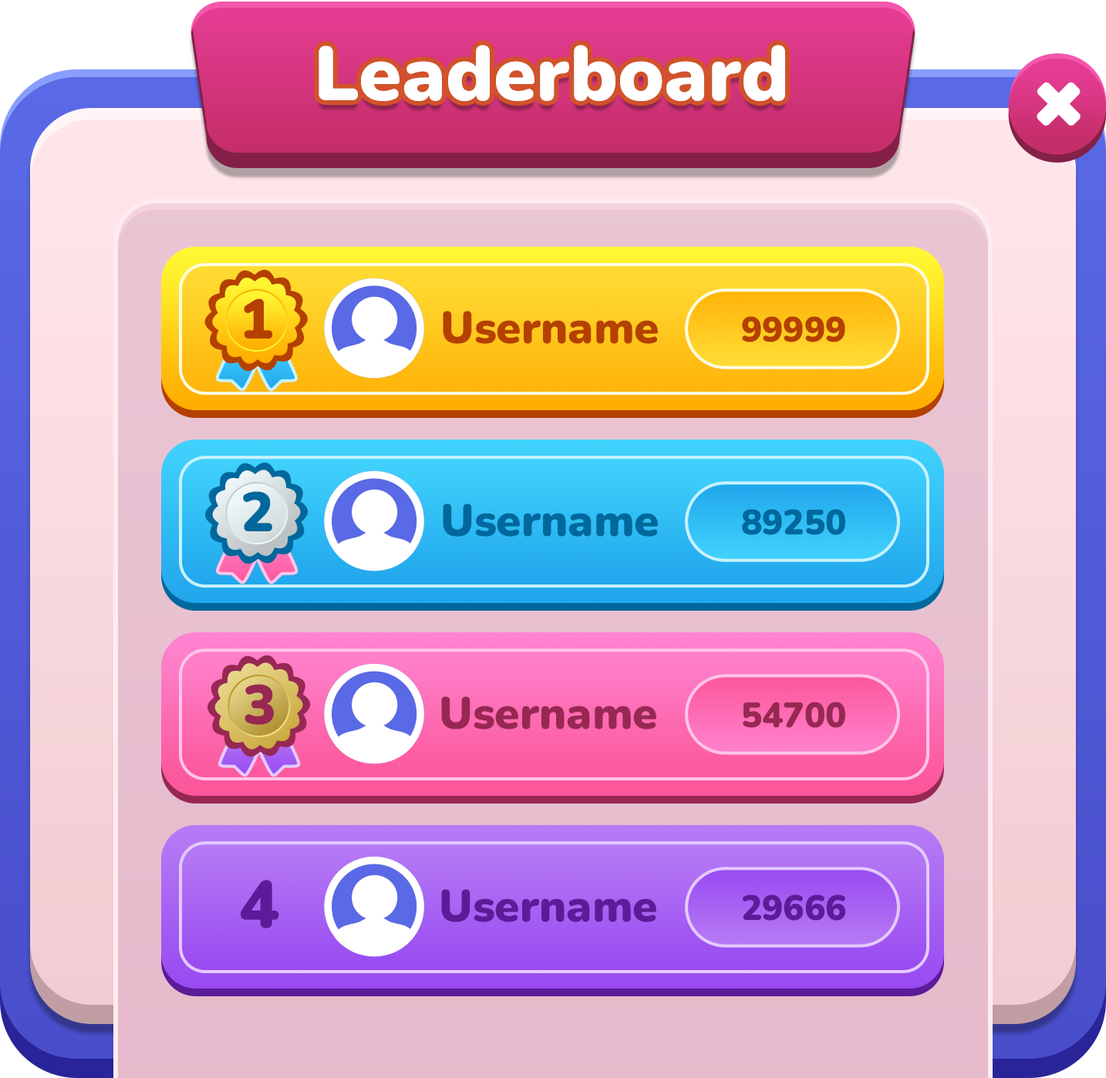
<style>
.page{position:relative;width:1106px;height:1078px}
.page>*{position:absolute;margin:0}
.t1{font:77.1px "Nunito-Black";color:#ffffff}
.t2{font:55.5px "Nunito-Black";color:#b44001}
.t3{font:45px "Nunito-Black";color:#b44001}
.t4{font:35.1px "Nunito-Black";color:#b44001}
.t5{font:55.5px "Nunito-Black";color:#00689c}
.t6{font:45px "Nunito-Black";color:#00689c}
.t7{font:35.1px "Nunito-Black";color:#00689c}
.t8{font:55.5px "Nunito-Black";color:#972853}
.t9{font:45px "Nunito-Black";color:#972853}
.t10{font:35.1px "Nunito-Black";color:#972853}
.t11{font:66.6px "Nunito-Black";color:#5c1b98}
.t12{font:45px "Nunito-Black";color:#5c1b98}
.t13{font:35.1px "Nunito-Black";color:#5c1b98}
</style>
<div class="page">
<p class="t1" style="left:319px;top:45px;width:466px;height:56px">Leaderboard</p>
<p class="t2" style="left:244px;top:298px;width:29px;height:41px">1</p>
<p class="t3" style="left:443px;top:311px;width:215px;height:33px">Username</p>
<p class="t4" style="left:742px;top:316px;width:103px;height:26px">99999</p>
<p class="t5" style="left:243px;top:491px;width:29px;height:40px">2</p>
<p class="t6" style="left:443px;top:504px;width:215px;height:33px">Username</p>
<p class="t7" style="left:742px;top:509px;width:103px;height:26px">89250</p>
<p class="t8" style="left:244px;top:684px;width:30px;height:41px">3</p>
<p class="t9" style="left:441px;top:696px;width:215px;height:34px">Username</p>
<p class="t10" style="left:743px;top:702px;width:102px;height:26px">54700</p>
<p class="t11" style="left:241px;top:880px;width:38px;height:49px">4</p>
<p class="t12" style="left:441px;top:889px;width:215px;height:33px">Username</p>
<p class="t13" style="left:743px;top:895px;width:102px;height:26px">29666</p>
</div>
